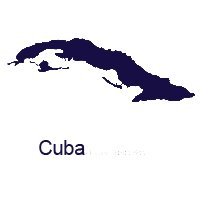
<style>
.page{position:relative;width:200px;height:200px;background:#ffffff}
.page>*{position:absolute;margin:0}
.t1{font:20.8px "ArialMT";color:#170f44;scale:0.94 1}
</style>
<div class="page">
<p class="t1" style="left:39px;top:140px;width:46px;height:15px">Cuba</p>
</div>
